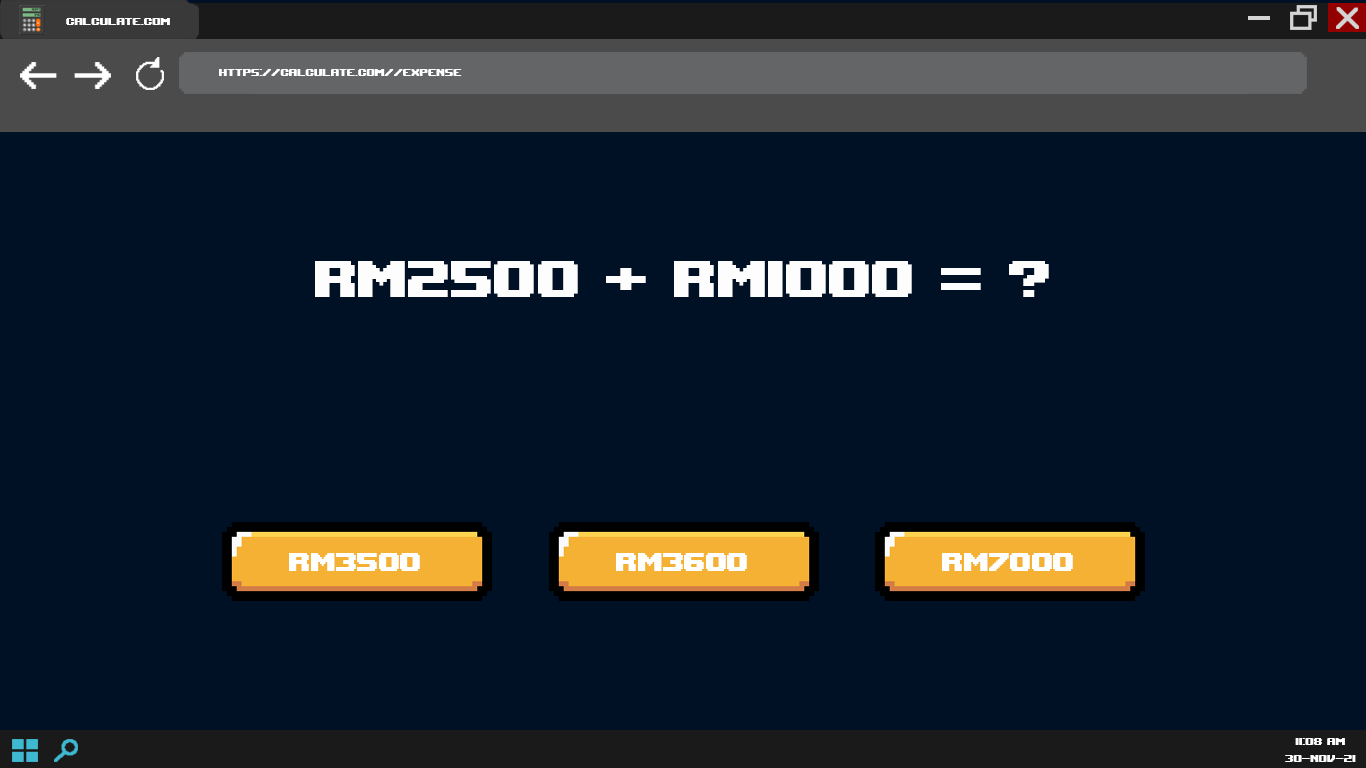
<style>
.page{position:relative;width:1366px;height:768px;background:#001125}
.page>*{position:absolute;margin:0}
.t1{font:14px "UpheavalTT-BRK-";color:#ffffff}
.t2{font:72px "UpheavalTT-BRK-";color:#fdfdfd}
.t3{font:36px "UpheavalTT-BRK-";color:#ffffff}
</style>
<div class="page">
<p class="t1" style="left:66px;top:18px;width:104px;height:7px">calculate.com</p>
<p class="t1" style="left:219px;top:69px;width:243px;height:7px">https://calculate.com//expense</p>
<p class="t2" style="left:315px;top:261px;width:734px;height:36px">rm2500 + rm1000 = ?</p>
<p class="t3" style="left:289px;top:553px;width:131px;height:18px">rm3500</p>
<p class="t3" style="left:616px;top:553px;width:131px;height:18px">rm3600</p>
<p class="t3" style="left:942px;top:553px;width:131px;height:18px">rm7000</p>
<p class="t1" style="left:1285px;top:738px;width:71px;height:24px;text-align:center">11:08 am<br>30-nov-21</p>
</div>
